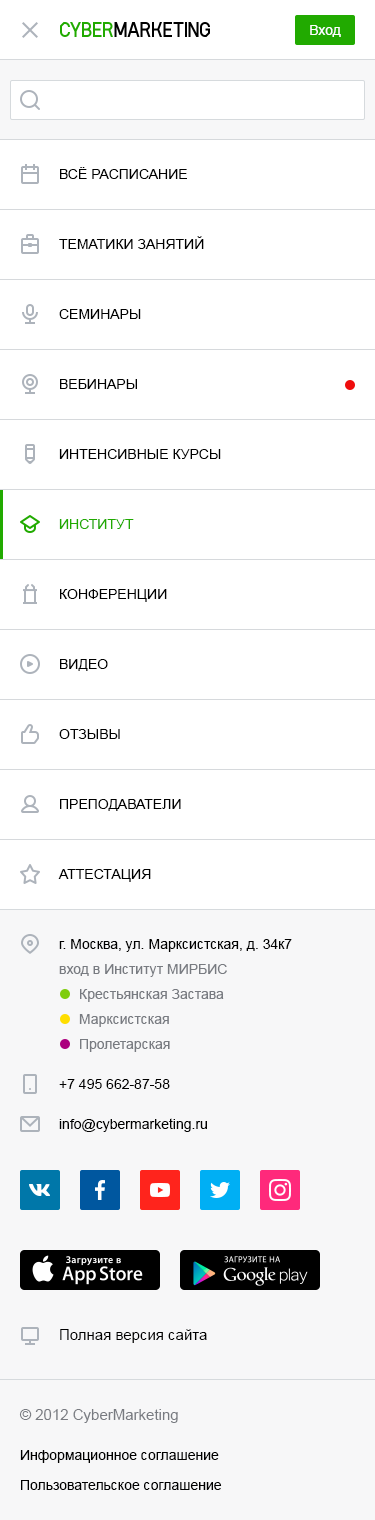
<style>
.page{position:relative;width:375px;height:1520px;background:#ffffff}
.page>*{position:absolute;margin:0}
.t1{font:14px "ArialMT";color:#ffffff}
.t2{font:14px "ArialMT";color:#000000;text-transform:uppercase}
.t3{font:14px "ArialMT";color:#21aa00;text-transform:uppercase}
.t4{font:14px/25px "ArialMT";color:#000000}
.t5{font:14px/25px "ArialMT";color:#787b81}
.t6{font:14px "ArialMT";color:#787b81}
.t7{font:14px/40px "ArialMT";color:#000000}
.t8{font:15px "ArialMT";color:#000000}
.t9{font:15px "ArialMT";color:#787b81}
.t10{font:14px "ArialMT";color:#000000}
</style>
<div class="page">
<p class="t1" style="left:310px;top:25px;width:31px;height:12px">Вход</p>
<p class="t2" style="left:60px;top:167px;width:127px;height:12px">Всё расписание</p>
<p class="t2" style="left:59px;top:236px;width:145px;height:13px">Тематики занятий</p>
<p class="t2" style="left:59px;top:309px;width:82px;height:10px">Семинары</p>
<p class="t2" style="left:60px;top:379px;width:77px;height:10px">Вебинары</p>
<p class="t2" style="left:59px;top:449px;width:162px;height:10px">Интенсивные курсы</p>
<p class="t3" style="left:59px;top:519px;width:75px;height:10px">Институт</p>
<p class="t2" style="left:60px;top:589px;width:107px;height:13px">Конференции</p>
<p class="t2" style="left:60px;top:659px;width:48px;height:12px">Видео</p>
<p class="t2" style="left:59px;top:729px;width:61px;height:10px">Отзывы</p>
<p class="t2" style="left:60px;top:799px;width:121px;height:12px">Преподаватели</p>
<p class="t2" style="left:58px;top:869px;width:93px;height:13px">Аттестация</p>
<p class="t4" style="left:59px;top:939px;width:233px;height:38px">г. Москва, ул. Марксистская, д. 34к7<br><span class="t5">вход в Институт МИРБИС</span></p>
<p class="t6" style="left:80px;top:989px;width:144px;height:13px">Крестьянская Застава</p>
<p class="t6" style="left:79px;top:1014px;width:90px;height:13px">Марксистская</p>
<p class="t6" style="left:80px;top:1039px;width:90px;height:13px">Пролетарская</p>
<p class="t7" style="left:59px;top:1079px;width:148px;height:53px">+7 495 662-87-58<br>info@cybermarketing.ru</p>
<p class="t8" style="left:60px;top:1329px;width:147px;height:14px">Полная версия сайта</p>
<p class="t9" style="left:19px;top:1409px;width:159px;height:14px">© 2012 CyberMarketing</p>
<p class="t10" style="left:20px;top:1450px;width:199px;height:13px">Информационное соглашение</p>
<p class="t10" style="left:21px;top:1480px;width:201px;height:10px">Пользовательское соглашение</p>
</div>
